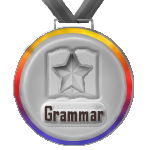
<style>
.page{position:relative;width:150px;height:150px;background:#ffffff}
.page>*{position:absolute;margin:0}
.t1{font:19.3px "AgencyFB-Bold";color:#3a2824;scale:0.95 1}
</style>
<div class="page">
<p class="t1" style="left:44px;top:105px;width:60px;height:17px">Grammar</p>
</div>
